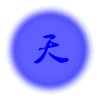
<style>
.page{position:relative;width:100px;height:100px;background:#ffffff}
.page>*{position:absolute;margin:0}
.t1{font:32px "2.0-";color:#0000ff;scale:1.15 1}
</style>
<div class="page">
<p class="t1" style="left:33px;top:34px;width:36px;height:30px">天</p>
</div>
